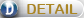
<style>
.page{position:relative;width:84px;height:18px}
.page>*{position:absolute;margin:0}
.t1{font:16px "SimSun";color:#ffffff;font-weight:bold}
.t2{font:14px "ArialRoundedMTBold";color:#ab8725}
</style>
<div class="page">
<p class="t1" style="left:5px;top:3px;width:9px;height:12px">D</p>
<p class="t2" style="left:27px;top:4px;width:51px;height:10px">DETAIL</p>
</div>
